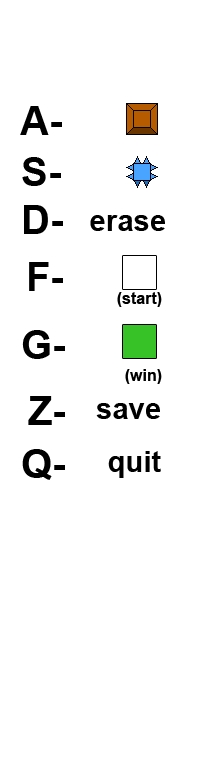
<style>
.page{position:relative;width:200px;height:768px;background:#ffffff}
.page>*{position:absolute;margin:0}
.t1{font:39.9px "Arial-BoldMT";color:#000000}
.t2{font:29.5px "Arial-BoldMT";color:#000000}
.t3{font:16px "Arial-BoldMT";color:#000000}
</style>
<div class="page">
<p class="t1" style="left:20px;top:106px;width:42px;height:29px">A-</p>
<p class="t1" style="left:22px;top:157px;width:39px;height:29px">S-</p>
<p class="t1" style="left:24px;top:205px;width:39px;height:29px">D-</p>
<p class="t2" style="left:90px;top:215px;width:75px;height:16px">erase</p>
<p class="t1" style="left:29px;top:262px;width:34px;height:29px">F-</p>
<p class="t3" style="left:117px;top:292px;width:45px;height:15px">(start)</p>
<p class="t1" style="left:22px;top:330px;width:43px;height:29px">G-</p>
<p class="t3" style="left:125px;top:369px;width:37px;height:15px">(win)</p>
<p class="t1" style="left:28px;top:396px;width:37px;height:29px">Z-</p>
<p class="t2" style="left:96px;top:403px;width:64px;height:16px">save</p>
<p class="t1" style="left:22px;top:449px;width:43px;height:31px">Q-</p>
<p class="t2" style="left:108px;top:451px;width:53px;height:27px">quit</p>
</div>
